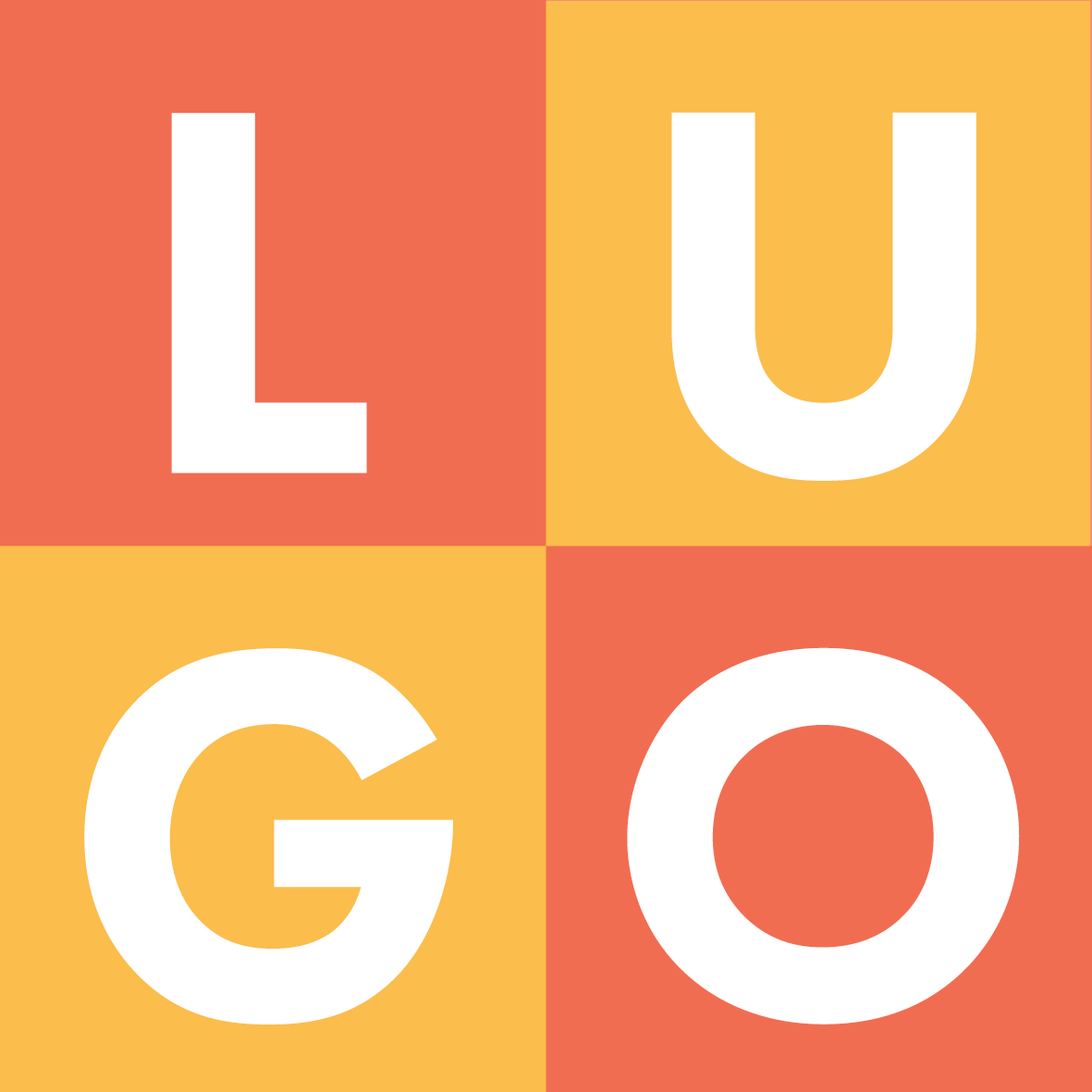
<style>
.page{position:relative;width:1092px;height:1092px;background:#f16d51}
.page>*{position:absolute;margin:0}
.t1{font:539.4px "FuturaPT-Heavy";letter-spacing:-0.025em;color:#ffffff}
</style>
<div class="page">
<p class="t1" style="left:171px;top:113px;width:196px;height:360px">L</p>
<p class="t1" style="left:671px;top:112px;width:305px;height:369px">U</p>
<p class="t1" style="left:84px;top:648px;width:369px;height:376px">G</p>
<p class="t1" style="left:627px;top:647px;width:393px;height:377px">O</p>
</div>
